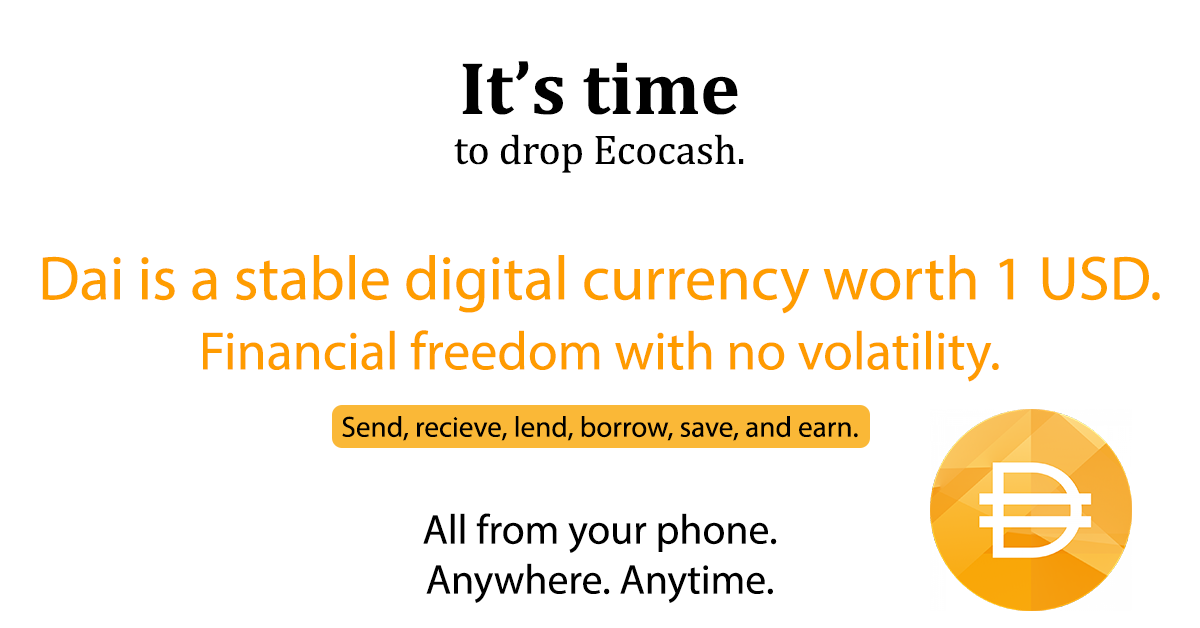
<style>
.page{position:relative;width:1200px;height:628px;background:#ffffff}
.page>*{position:absolute;margin:0}
.t1{font:41.7px "Cambria";color:#000000}
.t2{font:75px "Cambria-Bold";color:#000000}
.t3{font:62.5px "MyriadPro-Regular";color:#ff9d00}
.t4{font:54.2px "MyriadPro-Regular";color:#ff9b00}
.t5{font:29.2px "MyriadPro-Regular";color:#000000}
.t6{font:41.7px "MyriadPro-Regular";color:#000000}
</style>
<div class="page">
<p class="t1" style="left:454px;top:61px;width:290px;height:112px;text-align:center"><span class="t2">It’s time<br></span>to drop Ecocash.</p>
<p class="t3" style="left:42px;top:255px;width:1118px;height:59px">Dai is a stable digital currency worth 1 USD.</p>
<p class="t4" style="left:203px;top:330px;width:796px;height:52px">Financial freedom with no volatility.</p>
<p class="t5" style="left:342px;top:416px;width:516px;height:25px">Send, recieve, lend, borrow, save, and earn.</p>
<p class="t6" style="left:423px;top:513px;width:354px;height:90px;text-align:center">All from your phone. <br>Anywhere. Anytime.</p>
</div>
